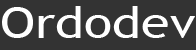
<style>
.page{position:relative;width:196px;height:50px;background:#333333}
.page>*{position:absolute;margin:0}
.t1{font:42.5px "TrebuchetMS";color:#ffffff;scale:1.23 1}
</style>
<div class="page">
<p class="t1" style="left:2px;top:6px;width:193px;height:32px">Ordodev</p>
</div>
